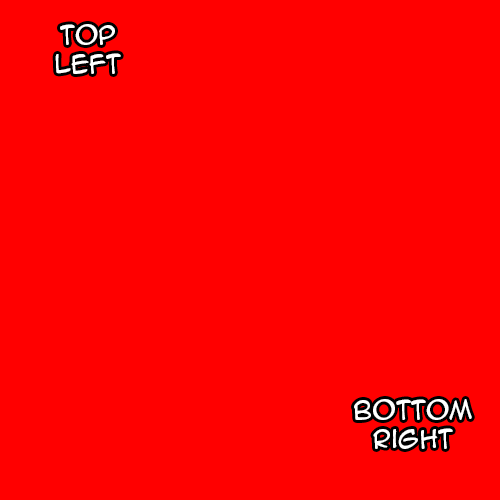
<style>
.page{position:relative;width:500px;height:500px;background:#ff0000}
.page>*{position:absolute;margin:0}
.t1{font:24px "AnimeAce2.0BB";color:#ffffff}
</style>
<div class="page">
<p class="t1" style="left:55px;top:24px;width:66px;height:50px;text-align:center">Top Left</p>
<p class="t1" style="left:354px;top:399px;width:118px;height:50px;text-align:center">Bottom<br>Right</p>
</div>
